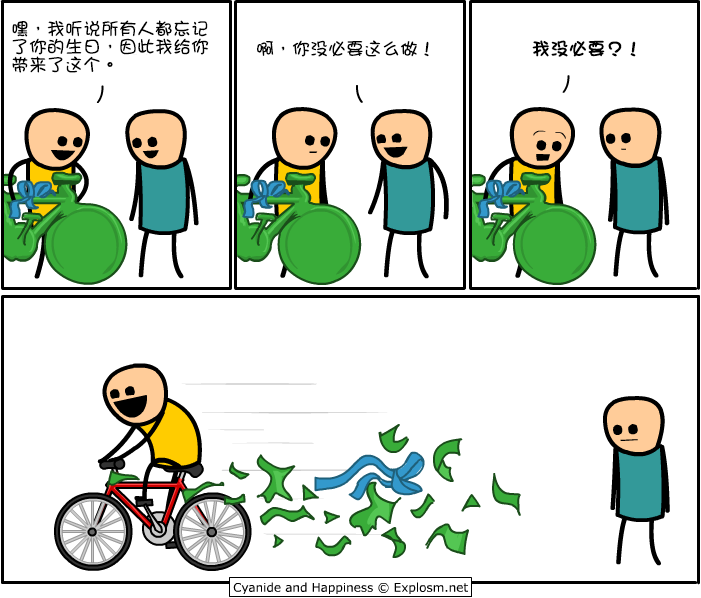
<style>
.page{position:relative;width:701px;height:598px;background:#ffffff}
.page>*{position:absolute;margin:0}
.t1{font:18px/18px "DFGirl";color:#000000}
.t2{font:18px "DFGirl";color:#000000}
.t3{font:18px "DFGirl";color:#000000;font-weight:bold}
</style>
<div class="page">
<p class="t1" style="left:12px;top:20px;width:197px;height:53px">嘿，我听说所有人都忘记<br>了你的生日，因此我给你<br>带来了这个。</p>
<p class="t2" style="left:257px;top:40px;width:172px;height:17px">啊，你没必要这么做！</p>
<p class="t3" style="left:532px;top:40px;width:104px;height:17px">我没必要？！</p>
</div>
